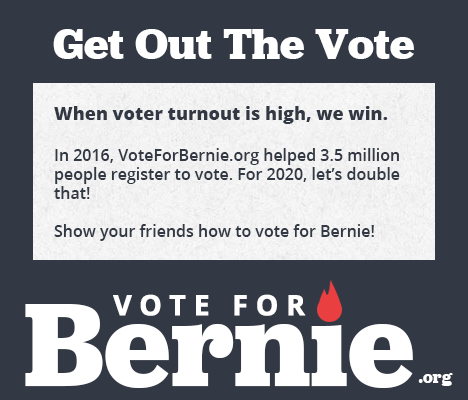
<style>
.page{position:relative;width:468px;height:400px;background:#323944}
.page>*{position:absolute;margin:0}
.t1{font:44.9px "Jubilat-Bold";color:#ffffff}
.t2{font:16px "OpenSans-SemiBold";color:#323944}
.t3{font:18px "OpenSans-ExtraBold";color:#323944}
.t4{font:28px "OpenSans-Bold";letter-spacing:0.26em;color:#ffffff;font-weight:bold}
.t5{font:122.9px "Jubilat-Bold";color:#ffffff}
.t6{font:17.3px "Jubilat-Bold";color:#ffffff}
</style>
<div class="page">
<p class="t1" style="left:53px;top:29px;width:361px;height:30px">Get Out The Vote</p>
<p class="t2" style="left:54px;top:106px;width:346px;height:135px"><span class="t3">When voter turnout is high, we win.<br><br></span>In 2016, VoteForBernie.org helped 3.5 million people register to vote. For 2020, let’s double that!<br><br>Show your friends how to vote for Bernie!</p>
<p class="t4" style="left:113px;top:294px;width:193px;height:22px">VOTE FOR</p>
<p class="t5" style="left:25px;top:299px;width:388px;height:89px">Bernie</p>
<p class="t6" style="left:418px;top:373px;width:35px;height:13px">.org</p>
</div>
